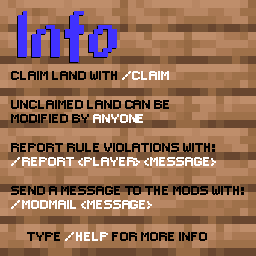
<style>
.page{position:relative;width:256px;height:256px}
.page>*{position:absolute;margin:0}
.t1{font:72px "DPComicRegular";color:#4031ff}
.t2{font:12px "Small-Pixel";color:#000000}
.t3{font:12px "Small-Pixel";color:#ffffff}
</style>
<div class="page">
<p class="t1" style="left:18px;top:11px;width:99px;height:51px">Info</p>
<p class="t2" style="left:11px;top:71px;width:233px;height:138px">Claim land with <span class="t3">/claim<br><br></span>Unclaimed land can be<br>modified by <span class="t3">ANYONE<br><br></span>Report rule violations with:<br><span class="t3">/report &lt;player&gt; &lt;message&gt;<br><br></span>Send a message to the mods with: <br><span class="t3">/modmail &lt;message&gt;</span></p>
<p class="t2" style="left:27px;top:232px;width:180px;height:9px">type <span class="t3">/help</span> for more info</p>
</div>
